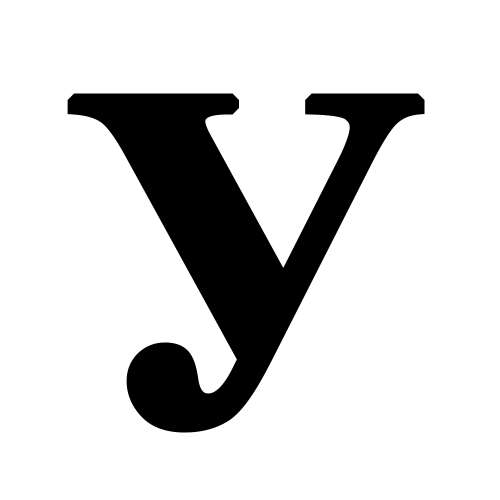
<style>
.page{position:relative;width:500px;height:500px;background:#ffffff}
.page>*{position:absolute;margin:0}
.t1{font:480px "TimesNewRomanPS-BoldMT";color:#000000;font-weight:bold}
</style>
<div class="page">
<p class="t1" style="left:67px;top:93px;width:358px;height:340px">У</p>
</div>
